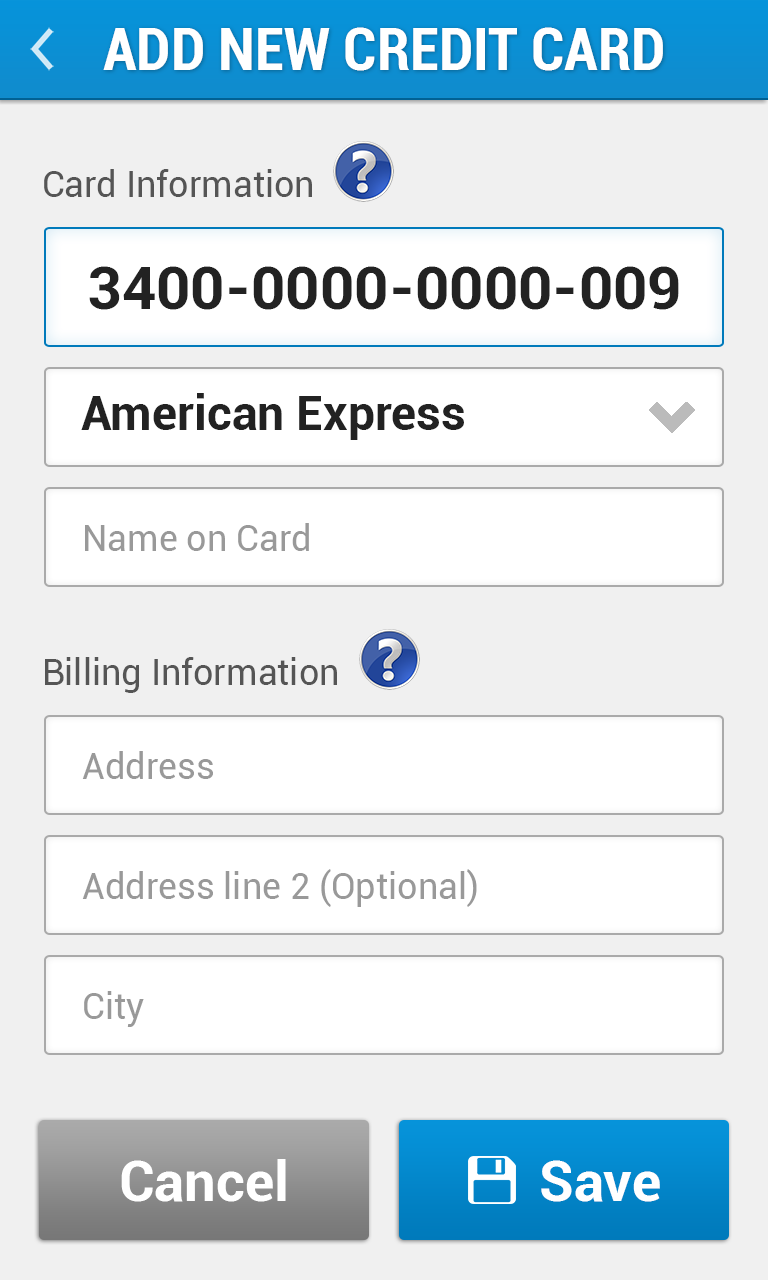
<style>
.page{position:relative;width:768px;height:1280px;background:#f0f0f0}
.page>*{position:absolute;margin:0}
.t1{font:60px "Roboto-BoldCondensed";color:#ffffff}
.t2{font:36px "Roboto-Regular";color:#555555}
.t3{font:60px "Roboto-Bold";color:#222222}
.t4{font:48px "Roboto-Bold";color:#222222}
.t5{font:36px "Roboto-Regular";color:#999999}
.t6{font:56px "Roboto-Bold";color:#ffffff}
</style>
<div class="page">
<p class="t1" style="left:103px;top:27px;width:560px;height:44px">ADD NEW CREDIT CARD</p>
<p class="t2" style="left:44px;top:169px;width:268px;height:28px">Card Information</p>
<p class="t3" style="left:89px;top:266px;width:590px;height:44px">3400-0000-0000-009</p>
<p class="t4" style="left:81px;top:393px;width:383px;height:47px">American Express</p>
<p class="t5" style="left:85px;top:523px;width:224px;height:28px">Name on Card</p>
<p class="t2" style="left:45px;top:657px;width:292px;height:36px">Billing Information</p>
<p class="t5" style="left:82px;top:751px;width:131px;height:28px">Address</p>
<p class="t5" style="left:82px;top:869px;width:395px;height:38px">Address line 2 (Optional)</p>
<p class="t5" style="left:84px;top:991px;width:60px;height:36px">City</p>
<p class="t6" style="left:121px;top:1159px;width:165px;height:43px">Cancel</p>
<p class="t6" style="left:541px;top:1160px;width:119px;height:42px">Save</p>
</div>
